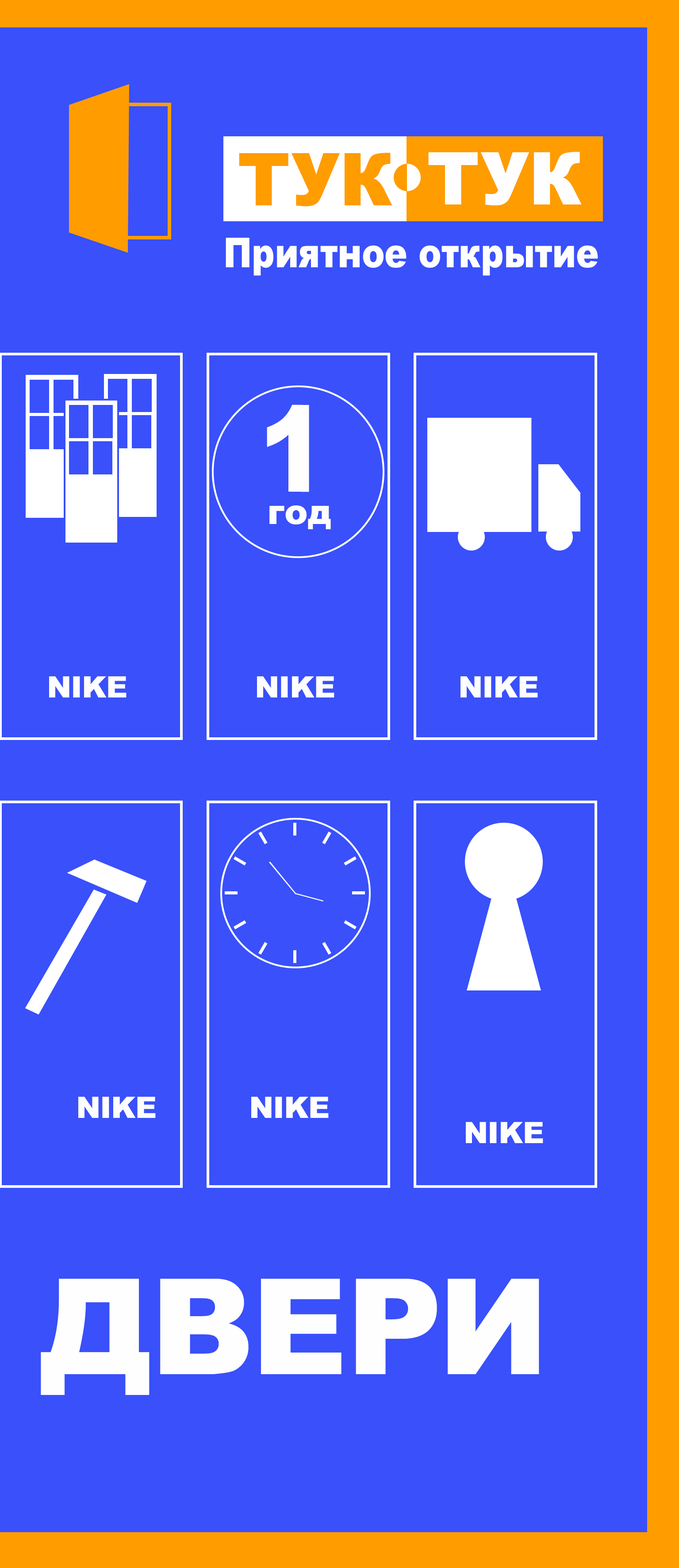
<style>
.page{position:relative;width:679px;height:1568px;background:#3950fb}
.page>*{position:absolute;margin:0}
.t1{font:73px "Arial-Black";color:#ff9c00}
.t2{font:73px "Arial-Black";color:#fefefe}
.t3{font:41.3px "Arial-Black";color:#fefefe;scale:0.83 1}
.t4{font:29.5px "Arial-Black";color:#fefefe}
.t5{font:133.2px "Arial-Black";color:#fefefe}
</style>
<div class="page">
<p class="t1" style="left:239px;top:153px;width:154px;height:53px">ТУК</p>
<p class="t2" style="left:428px;top:152px;width:154px;height:53px">ТУК</p>
<p class="t3" style="left:226px;top:238px;width:372px;height:38px">Приятное открытие</p>
<p class="t4" style="left:49px;top:676px;width:78px;height:21px">NIKE</p>
<p class="t4" style="left:257px;top:676px;width:78px;height:21px">NIKE</p>
<p class="t4" style="left:461px;top:676px;width:77px;height:21px">NIKE</p>
<p class="t4" style="left:78px;top:1097px;width:78px;height:21px">NIKE</p>
<p class="t4" style="left:251px;top:1097px;width:78px;height:21px">NIKE</p>
<p class="t4" style="left:466px;top:1122px;width:77px;height:21px">NIKE</p>
<p class="t5" style="left:41px;top:1279px;width:498px;height:116px">ДВЕРИ</p>
</div>
